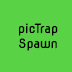
<style>
.page{position:relative;width:72px;height:72px;background:#5ad245}
.page>*{position:absolute;margin:0}
.t1{font:12.5px "NovaFlat";color:#000000}
</style>
<div class="page">
<p class="t1" style="left:19px;top:23px;width:39px;height:28px;text-align:center">picTrap<br>Spawn</p>
</div>
